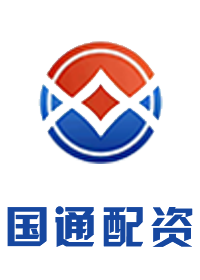
<style>
.page{position:relative;width:200px;height:280px;background:#ffffff}
.page>*{position:absolute;margin:0}
.t1{font:44px "JLinXin";letter-spacing:0.1em;color:#1647a0}
</style>
<div class="page">
<p class="t1" style="left:7px;top:206px;width:186px;height:41px">国通配资</p>
</div>
